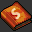
<style>
.page{position:relative;width:32px;height:32px;background:#333333}
.page>*{position:absolute;margin:0}
.t1{font:14.3px "OpenSans-ExtraboldItalic";color:#f3ceaa}
</style>
<div class="page">
<p class="t1" style="left:11px;top:7px;width:10px;height:13px;rotate:-50deg">S</p>
<p class="t1" style="left:11px;top:7px;width:10px;height:13px;rotate:-50deg">S</p>
</div>
